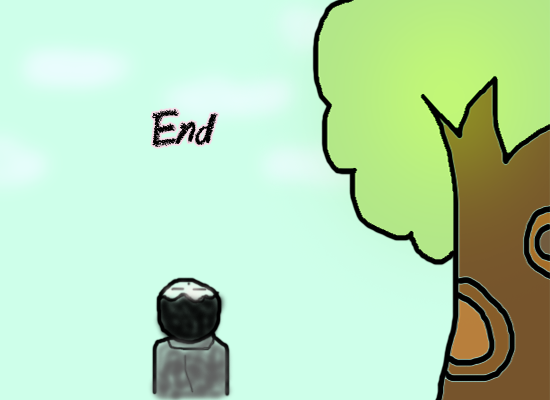
<style>
.page{position:relative;width:550px;height:400px;background:#ceffea}
.page>*{position:absolute;margin:0}
.t1{font:60px "Crayon";letter-spacing:-0.05em;color:#000000;scale:0.9 1}
</style>
<div class="page">
<p class="t1" style="left:152px;top:109px;width:66px;height:38px">End</p>
</div>
